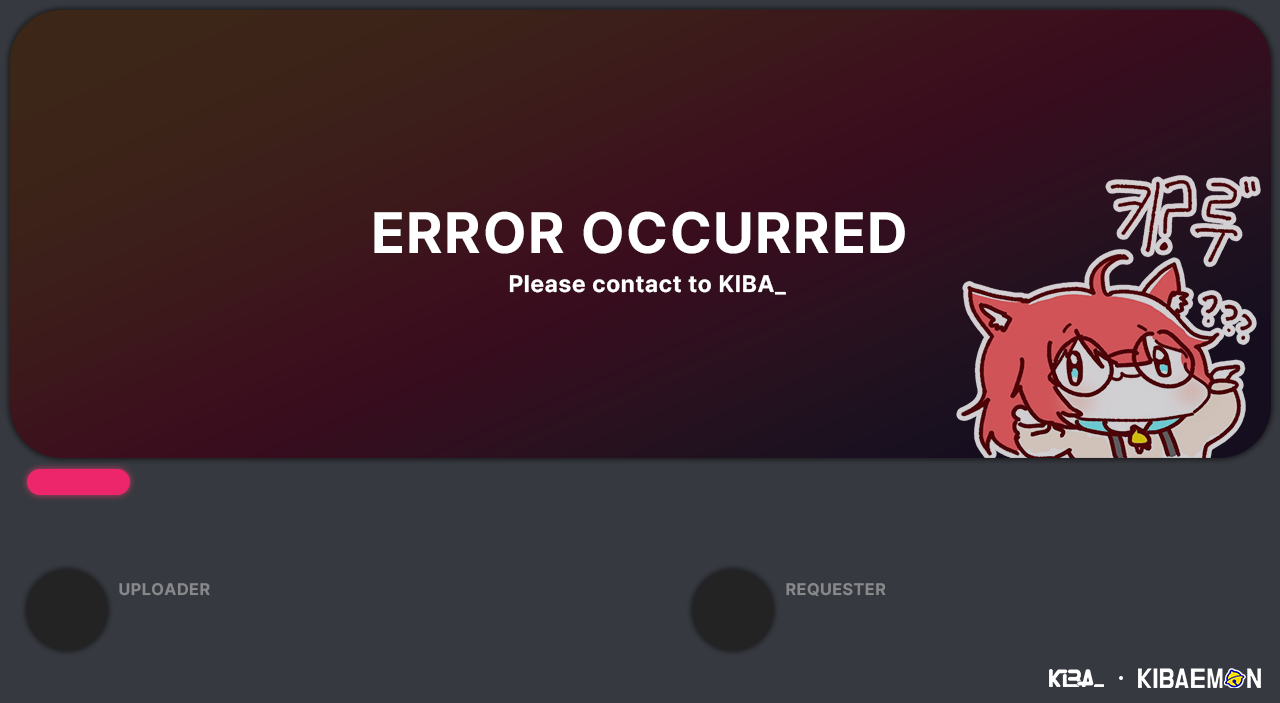
<style>
.page{position:relative;width:1280px;height:703px;background:#36393f}
.page>*{position:absolute;margin:0}
.t1{font:57.6px "PretendardVariable-Bold";letter-spacing:0.03em;color:#ffffff}
.t2{font:23.5px "PretendardVariable-Bold";letter-spacing:0.03em;color:#ffffff}
.t3{font:16.7px "PretendardVariable-Bold";letter-spacing:0.03em;color:#86888c}
</style>
<div class="page">
<p class="t1" style="left:374px;top:211px;width:531px;height:43px">ERROR OCCURRED</p>
<p class="t2" style="left:509px;top:275px;width:277px;height:20px">Please contact to KIBA_</p>
<p class="t3" style="left:119px;top:582px;width:91px;height:14px">UPLOADER</p>
<p class="t3" style="left:786px;top:582px;width:100px;height:15px">REQUESTER</p>
</div>
